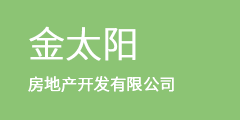
<style>
.page{position:relative;width:240px;height:120px;background:#8cc474}
.page>*{position:absolute;margin:0}
.t1{font:36px "NotoSansHans-Light";color:#ffffff;font-weight:bold}
.t2{font:16px "NotoSansHans-Light";color:#ffffff;font-weight:bold}
</style>
<div class="page">
<p class="t1" style="left:29px;top:26px;width:107px;height:35px">金太阳</p>
<p class="t2" style="left:28px;top:76px;width:146px;height:16px">房地产开发有限公司</p>
</div>
